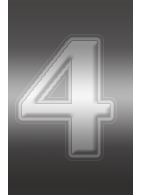
<style>
.page{position:relative;width:142px;height:195px}
.page>*{position:absolute;margin:0}
.t1{font:150px "Krungthep"}
</style>
<div class="page">
<p class="t1" style="left:22px;top:41px;width:88px;height:113px">4</p>
</div>
